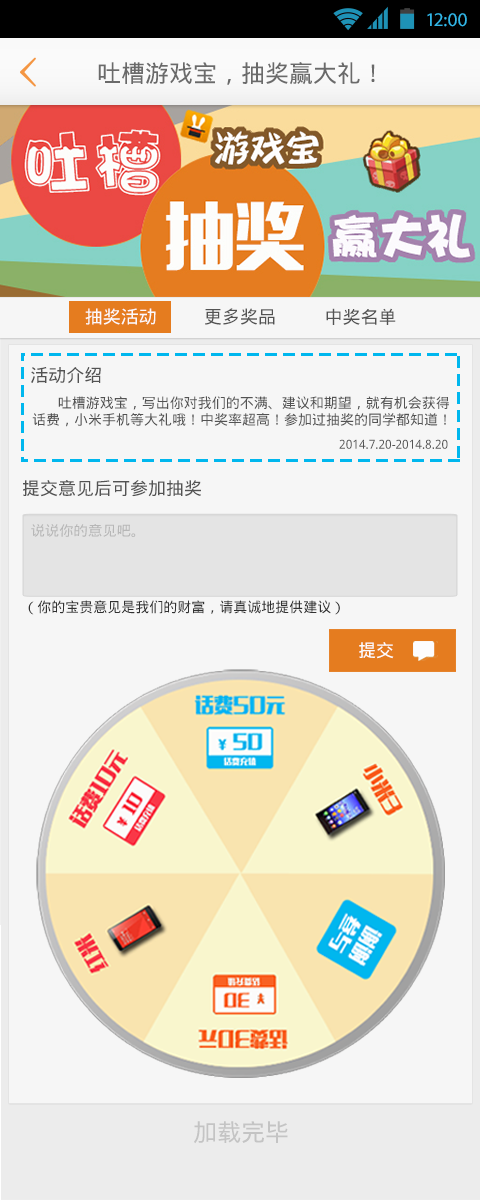
<style>
.page{position:relative;width:480px;height:1200px;background:#f6f6f6}
.page>*{position:absolute;margin:0}
.t1{font:19.4px "MyriadPro-Regular";color:#33b5e5}
.t2{font:24px "DroidSansFallback";color:#6a6a6a}
.t3{font:18px "DroidSansFallback";color:#fcf9f9}
.t4{font:18px "DroidSansFallback";color:#535353}
.t5{font:17.8px "DroidSansFallback";color:#535353}
.t6{font:18.1px "DroidSansFallback";color:#535353}
.t7{font:14.1px "DroidSansFallback";color:#535353}
.t8{font:12.5px "DroidSansFallback";color:#535353;scale:0.96 1}
.t9{font:14px "DroidSansFallback";color:#b7b7b7}
.t10{font:14.2px "DroidSansFallback";color:#313131}
.t11{font:17.8px "DroidSansFallback";color:#fdfbfa}
.t12{font:24px "DroidSansFallback";color:#c4c4c4}
</style>
<div class="page">
<p class="t1" style="left:427px;top:13px;width:40px;height:14px">12:00</p>
<p class="t2" style="left:98px;top:62px;width:277px;height:23px">吐槽游戏宝，抽奖赢大礼！</p>
<p class="t3" style="left:85px;top:308px;width:71px;height:17px">抽奖活动</p>
<p class="t4" style="left:205px;top:308px;width:70px;height:17px">更多奖品</p>
<p class="t5" style="left:326px;top:308px;width:70px;height:17px">中奖名单</p>
<p class="t6" style="left:31px;top:367px;width:70px;height:17px">活动介绍</p>
<p class="t7" style="left:32px;top:396px;width:417px;height:31px">吐槽游戏宝，写出你对我们的不满、建议和期望，就有机会获得<br>话费，小米手机等大礼哦！中奖率超高！参加过抽奖的同学都知道！</p>
<p class="t8" style="left:339px;top:439px;width:109px;height:10px">2014.7.20-2014.8.20</p>
<p class="t5" style="left:23px;top:480px;width:178px;height:17px">提交意见后可参加抽奖</p>
<p class="t9" style="left:31px;top:524px;width:105px;height:13px">说说你的意见吧。</p>
<p class="t10" style="left:28px;top:600px;width:312px;height:15px">（你的宝贵意见是我们的财富，请真诚地提供建议）</p>
<p class="t11" style="left:359px;top:642px;width:35px;height:17px">提交</p>
<p class="t12" style="left:194px;top:1121px;width:94px;height:23px">加载完毕</p>
</div>
